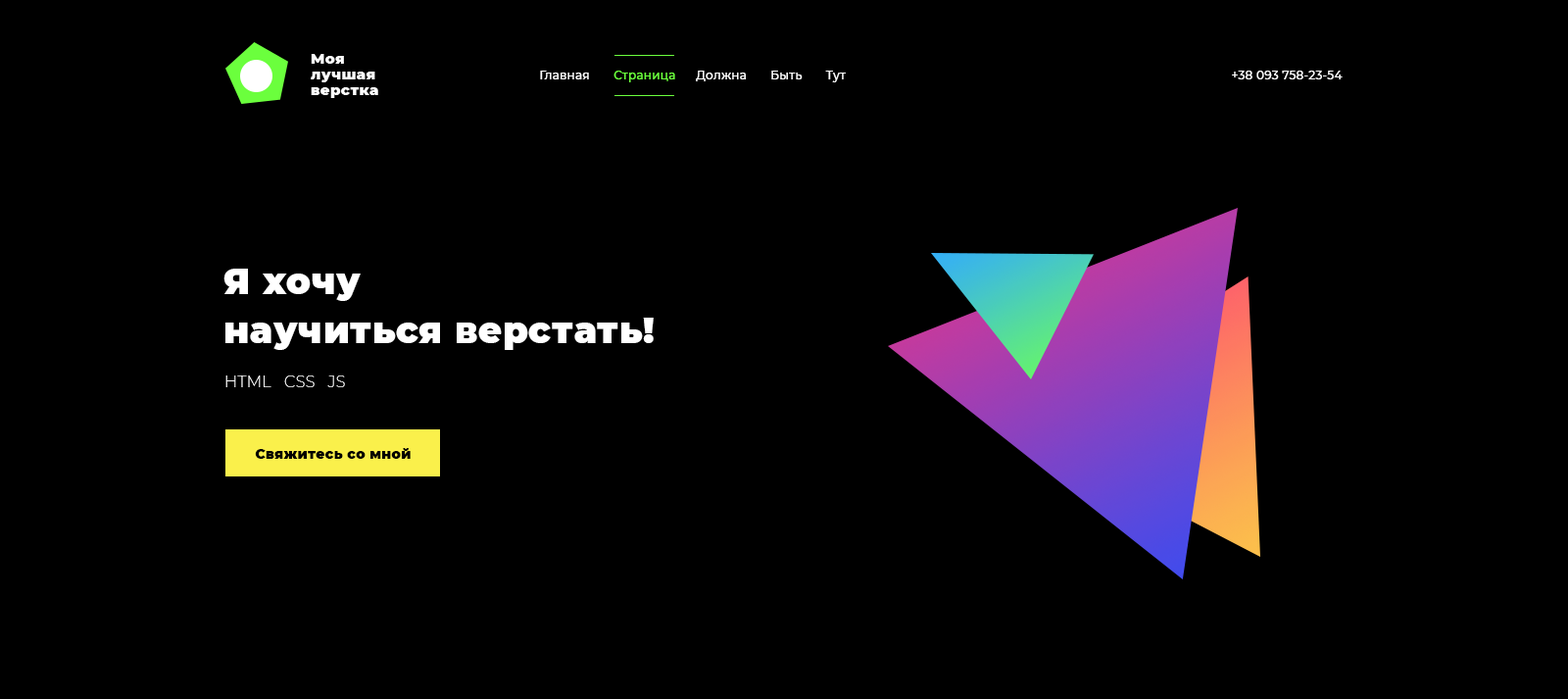
<style>
.page{position:relative;width:1568px;height:699px;background:#000000}
.page>*{position:absolute;margin:0}
.t1{font:11.8px "Montserrat-Medium";letter-spacing:0.02em;color:#ffffff}
.t2{font:11.8px "Montserrat-Medium";letter-spacing:0.02em;color:#6bff3d}
.t3{font:36.3px/49px "Montserrat-Black";letter-spacing:0.02em;color:#ffffff}
.t4{font:15.7px "Montserrat-ExtraLight";letter-spacing:0.02em;color:#ffffff}
.t5{font:13.7px "Montserrat-Black";letter-spacing:0.02em;color:#000000}
</style>
<div class="page">
<p class="t1" style="left:540px;top:71px;width:306px;height:11px">Главная       <span class="t2">Страница</span>      Должна       Быть       Тут</p>
<p class="t1" style="left:1232px;top:71px;width:111px;height:8px">+38 093 758-23-54</p>
<p class="t3" style="left:223px;top:269px;width:431px;height:81px">Я хочу<br>научиться верстать!</p>
<p class="t4" style="left:225px;top:375px;width:120px;height:12px">HTML   CSS   JS</p>
<p class="t5" style="left:255px;top:448px;width:156px;height:11px">Свяжитесь со мной</p>
</div>
